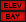
<style>
.page{position:relative;width:26px;height:22px;background:#171717}
.page>*{position:absolute;margin:0}
.t1{font:10px "ArialMT";color:#000000;font-variant:small-caps}
</style>
<div class="page">
<p class="t1" style="left:4px;top:3px;width:18px;height:5px">elev</p>
<p class="t1" style="left:6px;top:14px;width:14px;height:5px">bay</p>
</div>
